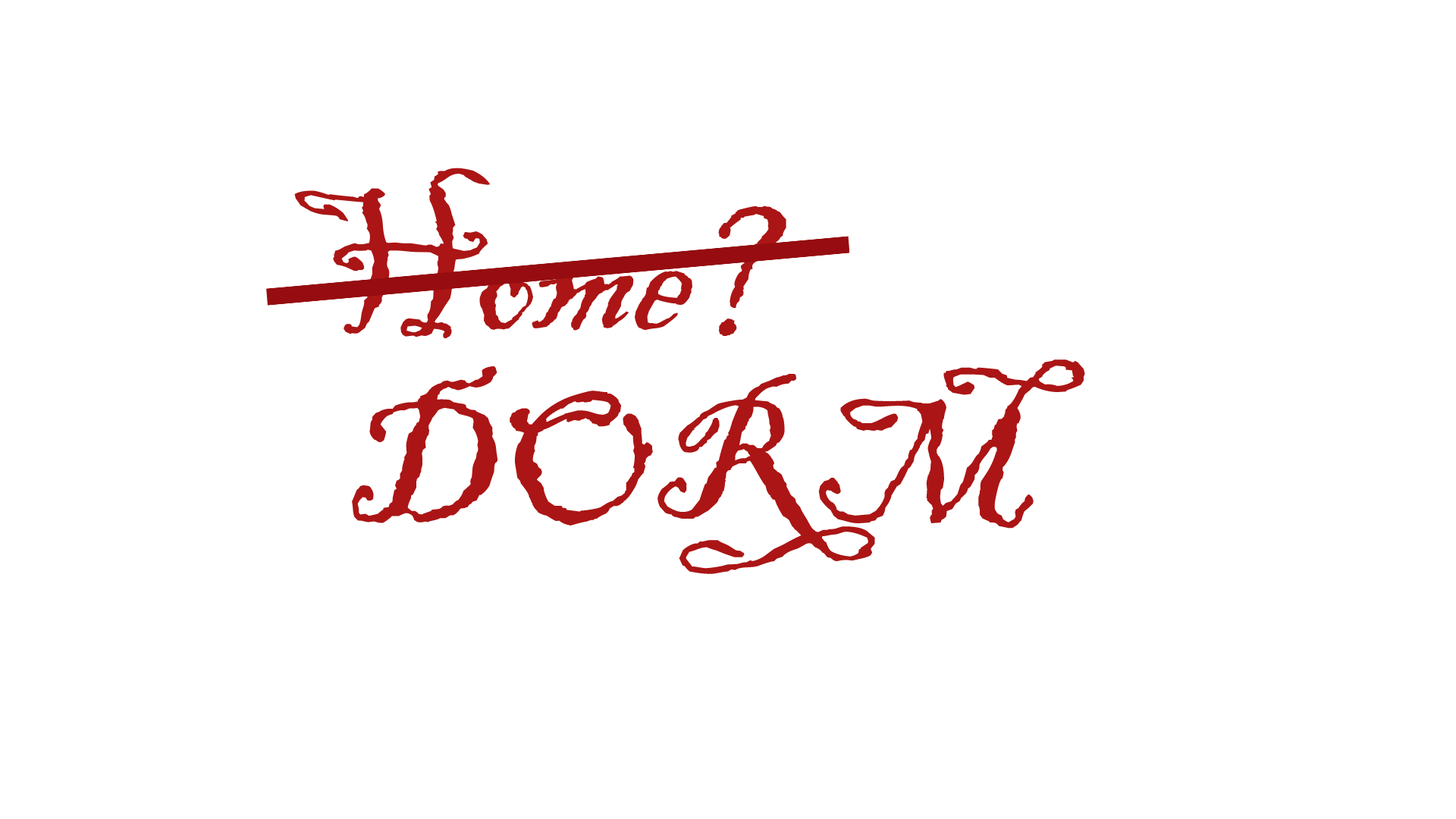
<style>
.page{position:relative;width:1456px;height:819px;background:#ffffff}
.page>*{position:absolute;margin:0}
.t1{font:189.6px "BlackadderITC-Regular";color:#ab1515}
</style>
<div class="page">
<p class="t1" style="left:294px;top:168px;width:399px;height:171px">Home</p>
<p class="t1" style="left:352px;top:359px;width:733px;height:215px">DORM</p>
</div>
